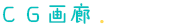
<style>
.page{position:relative;width:179px;height:27px;background:#ffffff}
.page>*{position:absolute;margin:0}
.t1{font:22px "BauhausITC";letter-spacing:0.1em;color:#02c1bf}
</style>
<div class="page">
<p class="t1" style="left:2px;top:3px;width:88px;height:21px">ＣＧ画廊</p>
</div>
